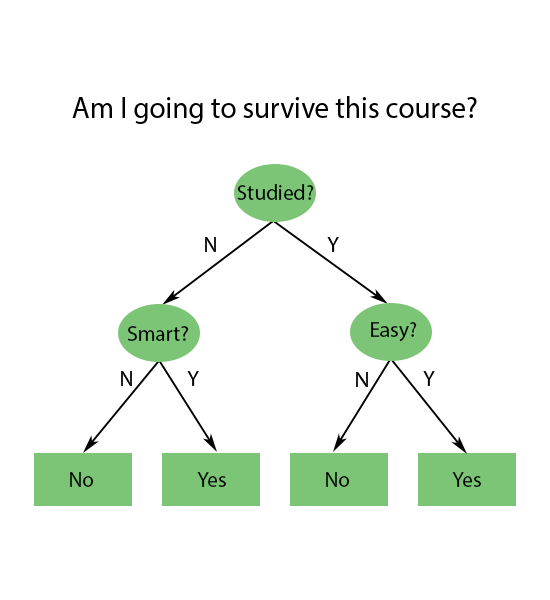
<style>
.page{position:relative;width:550px;height:600px;background:#ffffff}
.page>*{position:absolute;margin:0}
.t1{font:31.1px "MyriadPro-Regular";color:#000000;scale:0.94 1}
.t2{font:21.3px "MyriadPro-Regular";color:#000000}
</style>
<div class="page">
<p class="t1" style="left:72px;top:96px;width:405px;height:28px">Am I going to survive this course?</p>
<p class="t2" style="left:237px;top:184px;width:77px;height:16px">Studied?</p>
<p class="t2" style="left:205px;top:237px;width:11px;height:15px">N</p>
<p class="t2" style="left:327px;top:237px;width:12px;height:15px">Y</p>
<p class="t2" style="left:127px;top:326px;width:62px;height:15px">Smart?</p>
<p class="t2" style="left:371px;top:322px;width:46px;height:20px">Easy?</p>
<p class="t2" style="left:121px;top:371px;width:11px;height:15px">N</p>
<p class="t2" style="left:187px;top:371px;width:12px;height:15px">Y</p>
<p class="t2" style="left:356px;top:372px;width:12px;height:15px">N</p>
<p class="t2" style="left:423px;top:371px;width:12px;height:15px">Y</p>
<p class="t2" style="left:70px;top:472px;width:24px;height:15px">No</p>
<p class="t2" style="left:197px;top:472px;width:29px;height:15px">Yes</p>
<p class="t2" style="left:326px;top:472px;width:24px;height:15px">No</p>
<p class="t2" style="left:452px;top:472px;width:29px;height:15px">Yes</p>
</div>
